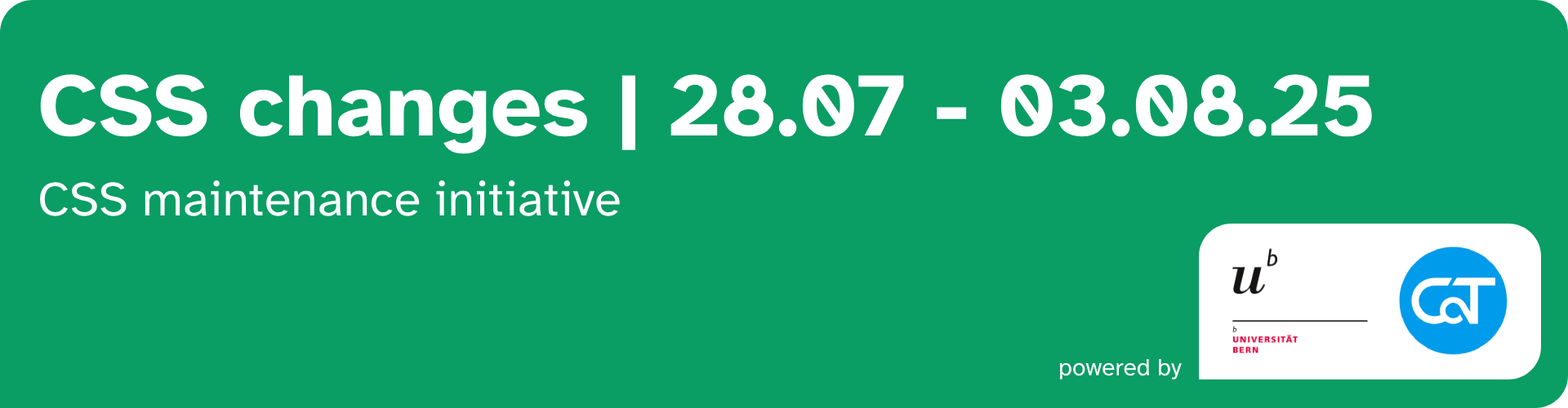
<style>
.page{position:relative;width:1568px;height:408px;background:#0a9d64}
.page>*{position:absolute;margin:0}
.t1{font:89.8px "AtkinsonHyperlegible-Bold";color:#ffffff}
.t2{font:49px "AtkinsonHyperlegible-Regular";color:#ffffff}
.t3{font:24.5px "AtkinsonHyperlegible-Regular";color:#ffffff}
</style>
<div class="page">
<p class="t1" style="left:40px;top:74px;width:1332px;height:80px">CSS changes | 28.07 - 03.08.25</p>
<p class="t2" style="left:40px;top:180px;width:580px;height:36px">CSS maintenance initiative</p>
<p class="t3" style="left:1060px;top:359px;width:122px;height:21px">powered by</p>
</div>
